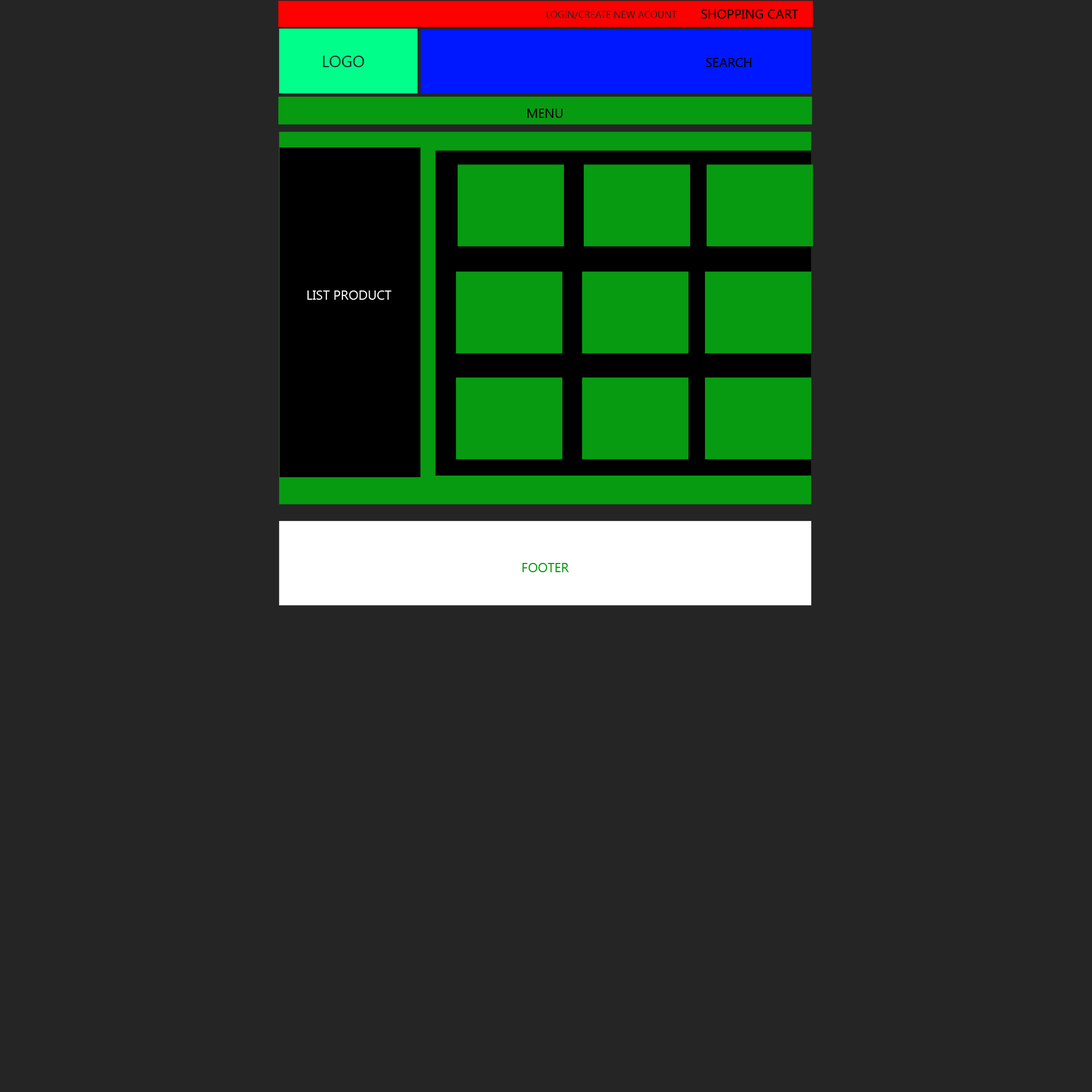
<style>
.page{position:relative;width:1092px;height:1092px;background:#252525}
.page>*{position:absolute;margin:0}
.t1{font:9.8px "SegoeUI";color:#252525;text-transform:uppercase}
.t2{font:13.1px "SegoeUI";color:#000000;text-transform:uppercase}
.t3{font:16.4px "SegoeUI";color:#252525;text-transform:uppercase}
.t4{font:13.1px "SegoeUI";color:#ffffff;text-transform:uppercase}
.t5{font:13.1px "SegoeUI";color:#079b11;text-transform:uppercase}
</style>
<div class="page">
<p class="t1" style="left:547px;top:11px;width:130px;height:8px">login/create new acount</p>
<p class="t2" style="left:701px;top:9px;width:97px;height:10px">shopping cart</p>
<p class="t3" style="left:323px;top:56px;width:41px;height:11px">Logo</p>
<p class="t2" style="left:706px;top:58px;width:45px;height:9px">search</p>
<p class="t2" style="left:527px;top:109px;width:36px;height:9px">menu</p>
<p class="t4" style="left:307px;top:290px;width:84px;height:10px">list product</p>
<p class="t5" style="left:523px;top:563px;width:46px;height:9px">Footer</p>
</div>
